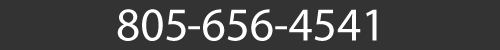
<style>
.page{position:relative;width:500px;height:50px;background:#333333}
.page>*{position:absolute;margin:0}
.t1{font:47.2px "MyriadPro-Regular";color:#ffffff}
.t2{font:47.2px "MyriadPro-Regular";letter-spacing:-0.04em;color:#ffffff}
</style>
<div class="page">
<p class="t1" style="left:117px;top:9px;width:260px;height:32px">80<span class="t2">5</span>-656-4541</p>
</div>
